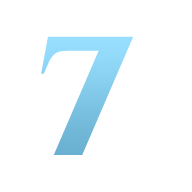
<style>
.page{position:relative;width:192px;height:192px;background:#ffffff}
.page>*{position:absolute;margin:0}
.t1{font:164.4px "PerpetuaTitlingMT-Bold";color:#81d7ff}
</style>
<div class="page">
<p class="t1" style="left:41px;top:36px;width:92px;height:119px">7</p>
</div>
